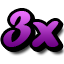
<style>
.page{position:relative;width:64px;height:64px;background:#ffffff}
.page>*{position:absolute;margin:0}
.t1{font:56px "ForteMT"}
</style>
<div class="page">
<p class="t1" style="left:3px;top:11px;width:56px;height:36px">3x</p>
</div>
